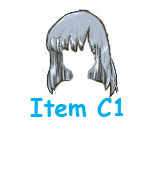
<style>
.page{position:relative;width:163px;height:192px;background:#ffffff}
.page>*{position:absolute;margin:0}
.t1{font:24px "ComicSansMS-Bold";color:#00aeef}
</style>
<div class="page">
<p class="t1" style="left:30px;top:98px;width:94px;height:19px">Item C1</p>
</div>
